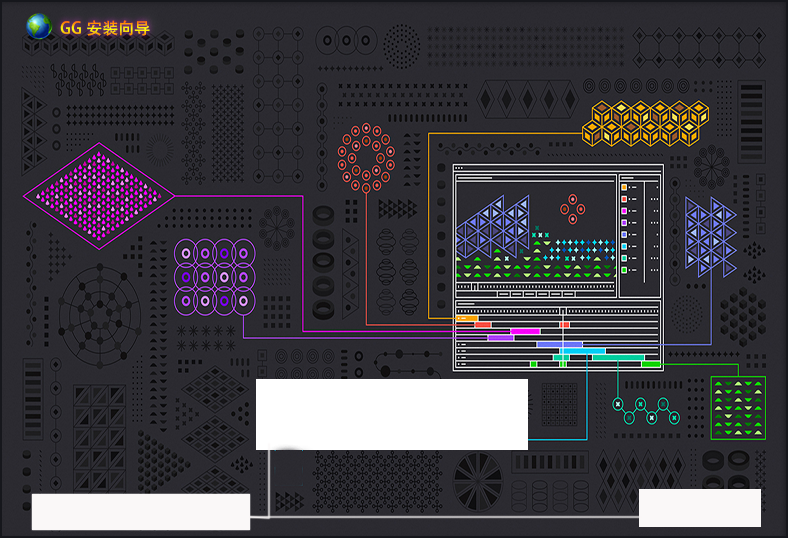
<style>
.page{position:relative;width:788px;height:538px}
.page>*{position:absolute;margin:0}
.t1{font:16px "AdobeHeitiStd-Regular"}
</style>
<div class="page">
<p class="t1" style="left:60px;top:20px;width:90px;height:16px">GG安装向导</p>
</div>
